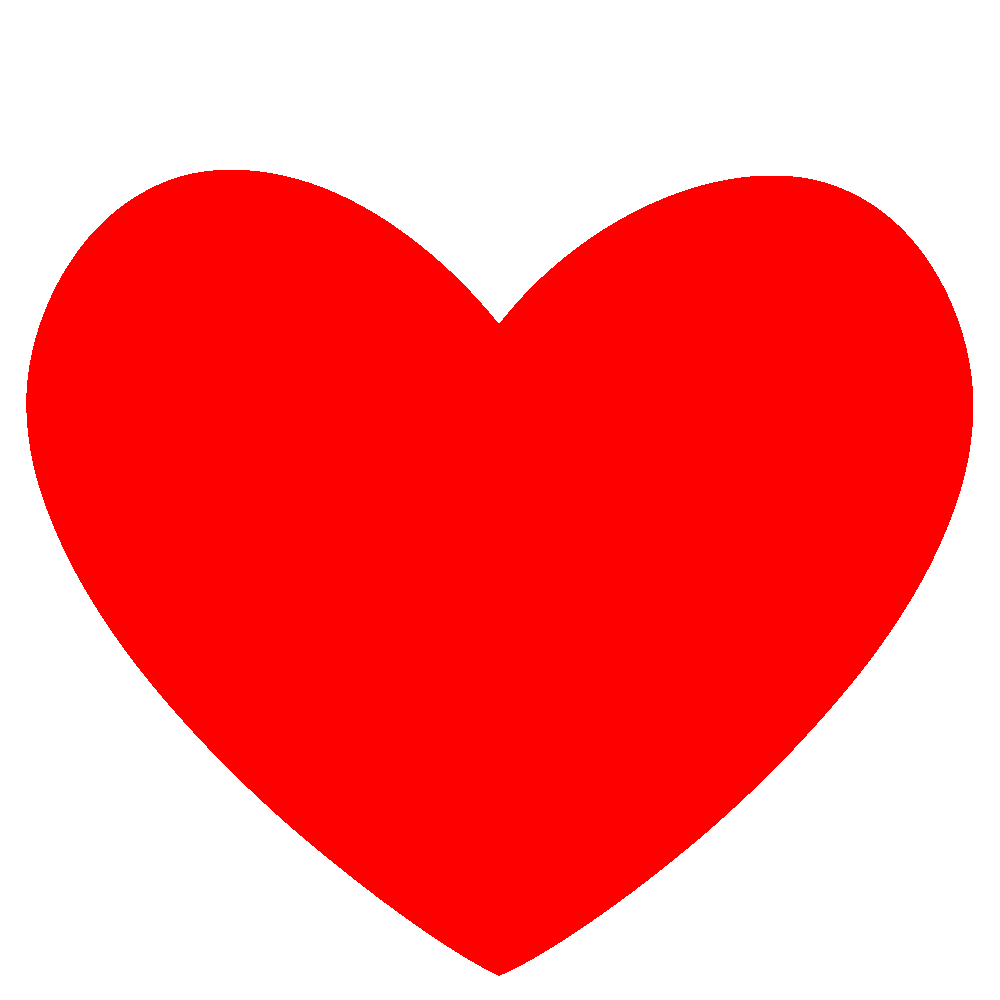
<style>
.page{position:relative;width:1000px;height:1000px;background:#ff0000}
.page>*{position:absolute;margin:0}
.t1{font:1083.3px "SegoeUISymbol";color:#ff0000}
</style>
<div class="page">
<p class="t1" style="left:26px;top:170px;width:947px;height:806px">❤</p>
</div>
